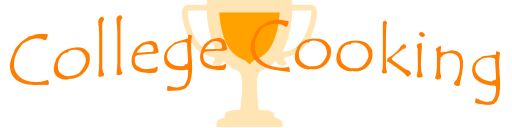
<style>
.page{position:relative;width:512px;height:128px;background:#ffffff}
.page>*{position:absolute;margin:0}
.t1{font:70.8px "TempusSansITC";color:#ff7e00}
</style>
<div class="page">
<p class="t1" style="left:9px;top:15px;width:492px;height:90px">College Cooking</p>
</div>
